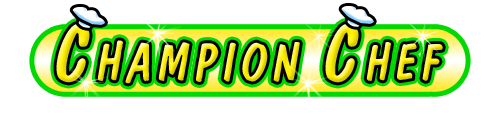
<style>
.page{position:relative;width:500px;height:120px;background:#ffffff}
.page>*{position:absolute;margin:0}
.t1{font:53.1px "DomCasualBT-Regular";letter-spacing:0.095em;font-style:italic}
.t2{font:79.8px "DomCasualBT-Regular";letter-spacing:0.095em;font-style:italic}
.t3{font:79.6px "DomCasualBT-Regular";letter-spacing:0.095em;font-style:italic}
.t4{font:51.1px "DomCasualBT-Regular";letter-spacing:0.095em;font-style:italic}
</style>
<div class="page">
<p class="t1" style="left:56px;top:23px;width:387px;height:61px"><span class="t2">C</span>HAMPION <span class="t3">C</span><span class="t4">HEF</span></p>
</div>
